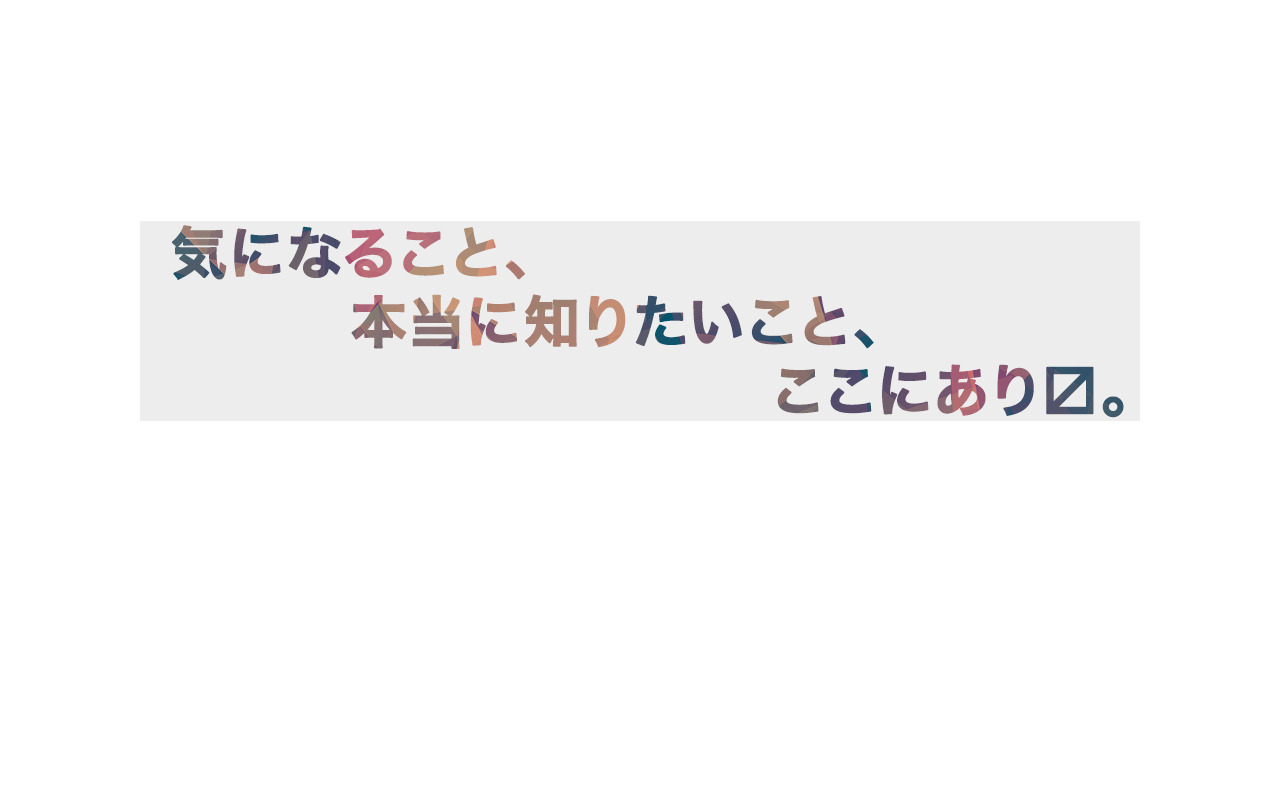
<style>
.page{position:relative;width:1280px;height:800px;background:#ffffff}
.page>*{position:absolute;margin:0}
.t1{font:56.3px/68.8px "HiraKakuPro-W6";letter-spacing:0.05em;font-weight:bold}
</style>
<div class="page">
<p class="t1" style="left:172px;top:225px;width:952px;height:193px">気になること、<br>     本当に知りたいこと、<br>                 ここにあり〼。</p>
</div>
